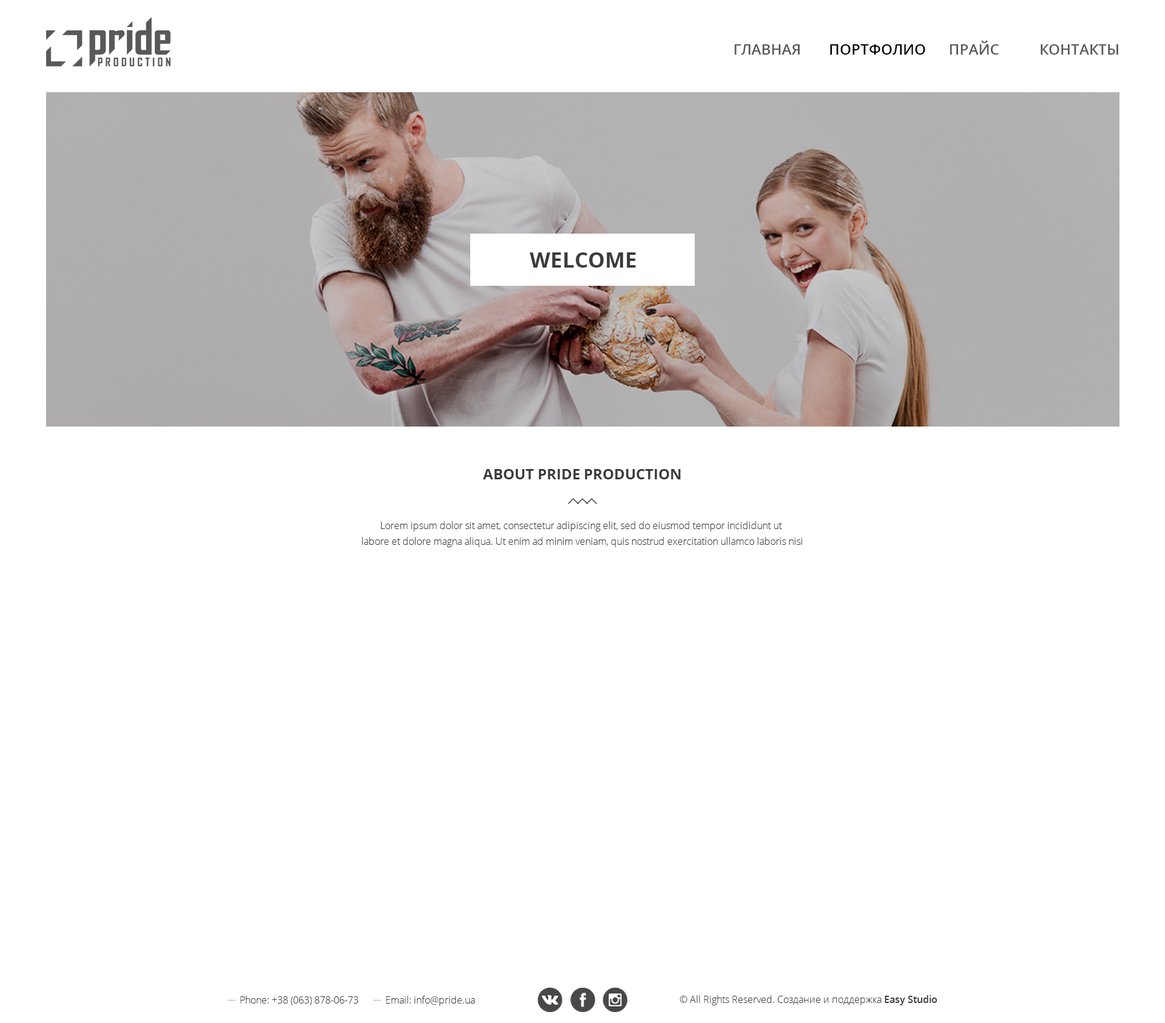
<style>
.page{position:relative;width:1165px;height:1023px;background:#ffffff}
.page>*{position:absolute;margin:0}
.t1{font:14.6px "OpenSans-Semibold";color:#595959;text-transform:uppercase}
.t2{font:14.6px "OpenSans-Semibold";color:#000000;text-transform:uppercase}
.t3{font:21.2px "OpenSans-Bold";color:#3b3b3b}
.t4{font:14.6px "OpenSans-Bold";color:#3b3b3b;text-transform:uppercase}
.t5{font:9.7px/15.8px "OpenSans-Light";color:#3b3b3b}
.t6{font:9.7px "OpenSans-Light";color:#3b3b3b}
.t7{font:9.7px "OpenSans-Semibold";color:#3b3b3b}
</style>
<div class="page">
<p class="t1" style="left:950px;top:41px;width:49px;height:14px">прайс</p>
<p class="t1" style="left:734px;top:44px;width:66px;height:11px">главная</p>
<p class="t2" style="left:830px;top:44px;width:96px;height:11px">портфолио</p>
<p class="t1" style="left:1041px;top:44px;width:78px;height:11px">контакты</p>
<p class="t3" style="left:530px;top:252px;width:106px;height:16px">WELCOME</p>
<p class="t4" style="left:483px;top:469px;width:198px;height:10px">ABOut pride production</p>
<p class="t5" style="left:362px;top:521px;width:440px;height:26px;text-align:center">Lorem ipsum dolor sit amet, consectetur adipiscing elit, sed do eiusmod tempor incididunt ut <br>labore et dolore magna aliqua. Ut enim ad minim veniam, quis nostrud exercitation ullamco laboris nisi</p>
<p class="t6" style="left:240px;top:996px;width:235px;height:10px">Phone: +38 (063) 878-06-73           Email: info@pride.ua</p>
<p class="t6" style="left:680px;top:995px;width:258px;height:11px">© All Rights Reserved. Создание и поддержка <span class="t7">Easy Studio</span></p>
</div>
